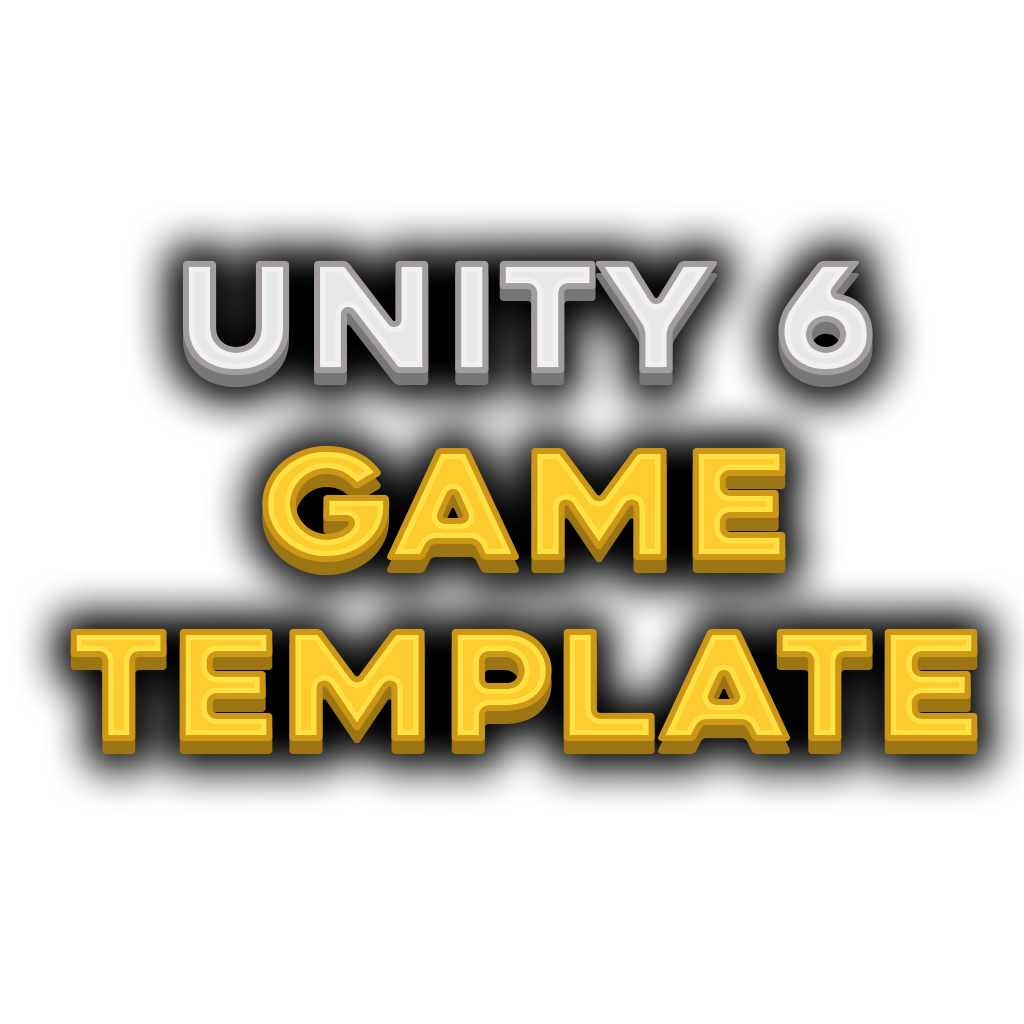
<style>
.page{position:relative;width:1024px;height:1024px;background:#ffffff}
.page>*{position:absolute;margin:0}
.t1{font:153.4px "Heavitas";letter-spacing:-0.025em;color:#e8e8e8;font-weight:bold;scale:1.08 1}
.t2{font:153.4px/181.5px "Heavitas";letter-spacing:-0.025em;color:#ffcc30;font-weight:bold;scale:1.08 1}
</style>
<div class="page">
<p class="t1" style="left:182px;top:260px;width:691px;height:116px">unity 6</p>
<p class="t2" style="left:70px;top:445px;width:908px;height:297px;text-align:center">GAME<br>template</p>
</div>
